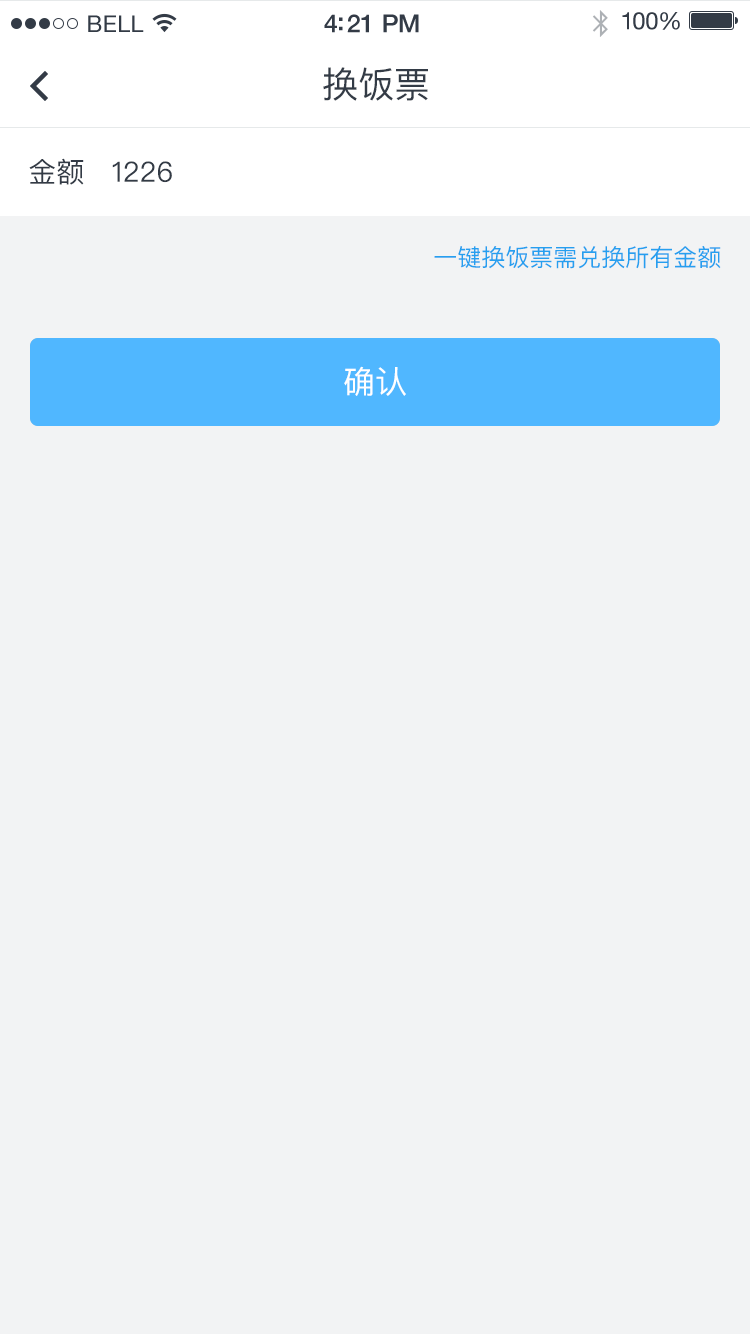
<style>
.page{position:relative;width:750px;height:1334px;background:#f2f3f4}
.page>*{position:absolute;margin:0}
.t1{font:23px "HelveticaNeue";letter-spacing:0.02em;color:#333b46}
.t2{font:25px "HelveticaNeue-Medium";letter-spacing:-0.02em;color:#333b46}
.t3{font:24px "HelveticaNeue";letter-spacing:-0.02em;color:#333b46}
.t4{font:36px "PingFangSC-Regular";color:#333b46}
.t5{font:28px "PingFangSC-Regular";color:#333b46}
.t6{font:24px "PingFangSC-Regular";color:#269fef}
.t7{font:32px "PingFangSC-Regular";color:#ffffff}
</style>
<div class="page">
<p class="t1" style="left:88px;top:15px;width:56px;height:17px">BELL</p>
<p class="t2" style="left:324px;top:14px;width:95px;height:19px">4:21 PM</p>
<p class="t3" style="left:622px;top:12px;width:58px;height:18px">100%</p>
<p class="t4" style="left:323px;top:67px;width:105px;height:34px">换饭票</p>
<p class="t5" style="left:29px;top:158px;width:55px;height:27px">金额</p>
<p class="t5" style="left:112px;top:161px;width:60px;height:22px">1226</p>
<p class="t6" style="left:434px;top:246px;width:287px;height:23px">一键换饭票需兑换所有金额</p>
<p class="t7" style="left:344px;top:366px;width:62px;height:30px">确认</p>
</div>
